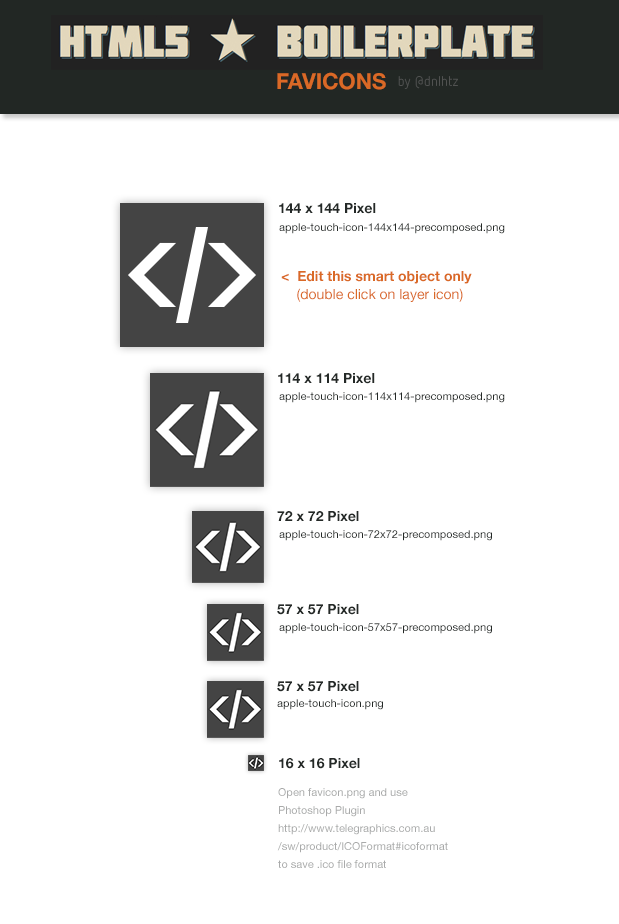
<style>
.page{position:relative;width:619px;height:924px;background:#ffffff}
.page>*{position:absolute;margin:0}
.t1{font:22px "HelveticaNeue-Bold";color:#da6926}
.t2{font:14px "HelveticaNeue-Bold";color:#242927}
.t3{font:11px "HelveticaNeue";color:#242927}
.t4{font:14px/14px "HelveticaNeue-Bold";color:#da6926}
.t5{font:14px/18px "HelveticaNeue";color:#da6926}
.t6{font:11px/18px "HelveticaNeue";color:#a9aaaa}
</style>
<div class="page">
<p class="t1" style="left:277px;top:72px;width:109px;height:18px">FAVICONS</p>
<p class="t2" style="left:279px;top:203px;width:97px;height:11px">144 x 144 Pixel</p>
<p class="t3" style="left:279px;top:223px;width:226px;height:11px">apple-touch-icon-144x144-precomposed.png</p>
<p class="t4" style="left:281px;top:271px;width:191px;height:31px">&lt;  Edit this smart object only<br><span class="t5">    (double click on layer icon)</span></p>
<p class="t2" style="left:278px;top:373px;width:97px;height:11px">114 x 114 Pixel</p>
<p class="t3" style="left:279px;top:392px;width:226px;height:11px">apple-touch-icon-114x114-precomposed.png</p>
<p class="t2" style="left:277px;top:511px;width:82px;height:11px">72 x 72 Pixel</p>
<p class="t3" style="left:279px;top:530px;width:213px;height:11px">apple-touch-icon-72x72-precomposed.png</p>
<p class="t2" style="left:277px;top:604px;width:82px;height:11px">57 x 57 Pixel</p>
<p class="t3" style="left:279px;top:623px;width:213px;height:11px">apple-touch-icon-57x57-precomposed.png</p>
<p class="t2" style="left:277px;top:681px;width:82px;height:11px">57 x 57 Pixel</p>
<p class="t3" style="left:277px;top:699px;width:106px;height:11px">apple-touch-icon.png</p>
<p class="t2" style="left:279px;top:758px;width:81px;height:11px">16 x 16 Pixel</p>
<p class="t6" style="left:277px;top:788px;width:171px;height:80px">Open favicon.png and use <br>Photoshop Plugin <br>http://www.telegraphics.com.au<br>/sw/product/ICOFormat#icoformat<br>to save .ico file format</p>
</div>
